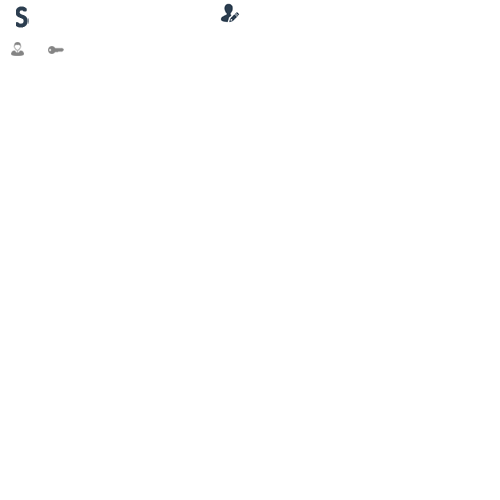
<style>
.page{position:relative;width:500px;height:500px;background:#ffffff}
.page>*{position:absolute;margin:0}
.t1{font:28.4px "RimouskiSb-Regular";color:#2c3e50;font-weight:bold}
</style>
<div class="page">
<p class="t1" style="left:16px;top:6px;width:13px;height:22px">S</p>
</div>
